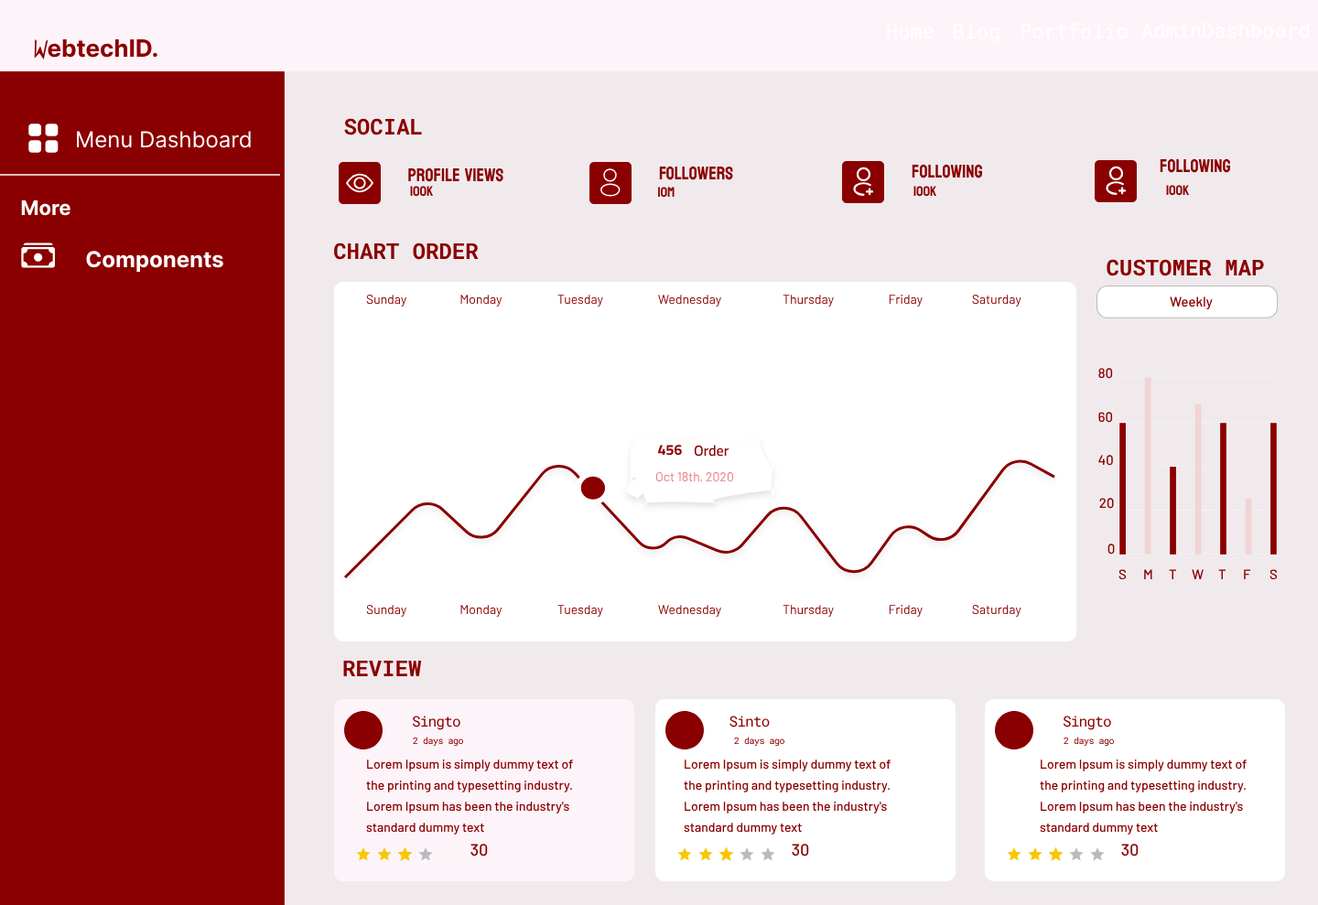
<style>
.page{position:relative;width:1318px;height:905px;background:#f0eaed}
.page>*{position:absolute;margin:0}
.t1{font:20.1px "RobotoMono-Regular";color:#ffffff}
.t2{font:23.8px "Inter-Bold";color:#8b0000}
.t3{font:22px "RobotoMono-Bold";color:#8b0000}
.t4{font:22px "Inter-Regular";color:#ffffff}
.t5{font:18.3px "Koulen-Regular";color:#8b0000}
.t6{font:13.7px "Koulen-Regular";color:#8b0000}
.t7{font:20.1px "Inter-Bold";color:#ffffff}
.t8{font:22px "Inter-Bold";color:#ffffff}
.t9{font:12.8px "Barlow-Regular";color:#8b0000}
.t10{font:13.7px "Barlow-Medium";color:#8b0000}
.t11{font:14.6px "Cairo-Bold";color:#8b0000}
.t12{font:14.6px "Cairo-SemiBold";color:#8b0000}
.t13{font:12.8px "Barlow-Regular";color:#e77676}
.t14{font:14.6px "RobotoMono-Regular";letter-spacing:-0.05em;color:#8b0000}
.t15{font:9.2px "RobotoMono-Regular";letter-spacing:-0.05em;color:#910e0f}
.t16{font:9.2px "RobotoMono-Regular";letter-spacing:-0.05em;color:#910f0f}
.t17{font:12.8px/21px "Barlow-Medium";color:#8b0000}
.t18{font:16.5px "Barlow-Medium";color:#8b0000}
</style>
<div class="page">
<p class="t1" style="left:887px;top:24px;width:46px;height:15px">Home</p>
<p class="t1" style="left:953px;top:23px;width:46px;height:20px">Blog</p>
<p class="t1" style="left:1021px;top:23px;width:106px;height:16px">Portfolio</p>
<p class="t1" style="left:1141px;top:22px;width:167px;height:16px">AdminDashboard</p>
<p class="t2" style="left:48px;top:39px;width:109px;height:19px">ebtechID.</p>
<p class="t3" style="left:344px;top:118px;width:78px;height:17px">SOCIAL</p>
<p class="t4" style="left:77px;top:131px;width:174px;height:17px">Menu Dashboard</p>
<p class="t5" style="left:1159px;top:158px;width:71px;height:15px">following</p>
<p class="t5" style="left:408px;top:167px;width:95px;height:15px">profile views</p>
<p class="t5" style="left:659px;top:166px;width:74px;height:14px">Followers</p>
<p class="t5" style="left:911px;top:164px;width:71px;height:14px">following</p>
<p class="t6" style="left:410px;top:186px;width:24px;height:11px">100k</p>
<p class="t6" style="left:913px;top:186px;width:24px;height:11px">100k</p>
<p class="t6" style="left:1166px;top:185px;width:24px;height:11px">100k</p>
<p class="t6" style="left:658px;top:187px;width:16px;height:11px">10m</p>
<p class="t7" style="left:21px;top:200px;width:49px;height:16px">More</p>
<p class="t3" style="left:334px;top:242px;width:145px;height:18px">CHART ORDER</p>
<p class="t8" style="left:86px;top:251px;width:137px;height:21px">Components</p>
<p class="t3" style="left:1106px;top:259px;width:158px;height:17px">CUSTOMER MAP</p>
<p class="t9" style="left:366px;top:295px;width:40px;height:12px">Sunday</p>
<p class="t9" style="left:460px;top:295px;width:42px;height:12px">Monday</p>
<p class="t9" style="left:557px;top:295px;width:46px;height:12px">Tuesday</p>
<p class="t9" style="left:658px;top:295px;width:63px;height:12px">Wednesday</p>
<p class="t9" style="left:782px;top:295px;width:52px;height:12px">Thursday</p>
<p class="t9" style="left:888px;top:295px;width:34px;height:12px">Friday</p>
<p class="t9" style="left:972px;top:295px;width:49px;height:12px">Saturday</p>
<p class="t10" style="left:1169px;top:296px;width:43px;height:13px">Weekly</p>
<p class="t10" style="left:1098px;top:368px;width:15px;height:11px">80</p>
<p class="t10" style="left:1098px;top:412px;width:15px;height:11px">60</p>
<p class="t11" style="left:658px;top:445px;width:24px;height:11px">456</p>
<p class="t12" style="left:694px;top:445px;width:35px;height:12px">Order</p>
<p class="t10" style="left:1098px;top:455px;width:15px;height:11px">40</p>
<p class="t13" style="left:656px;top:472px;width:77px;height:11px">Oct 18th, 2020</p>
<p class="t10" style="left:1099px;top:498px;width:15px;height:11px">20</p>
<p class="t10" style="left:1107px;top:544px;width:8px;height:11px">0</p>
<p class="t10" style="left:1118px;top:569px;width:8px;height:11px">S</p>
<p class="t10" style="left:1144px;top:569px;width:8px;height:10px">M</p>
<p class="t10" style="left:1168px;top:569px;width:9px;height:10px">T</p>
<p class="t10" style="left:1191px;top:569px;width:12px;height:10px">W</p>
<p class="t10" style="left:1218px;top:569px;width:8px;height:10px">T</p>
<p class="t10" style="left:1244px;top:569px;width:7px;height:10px">F</p>
<p class="t10" style="left:1269px;top:569px;width:8px;height:11px">S</p>
<p class="t9" style="left:366px;top:605px;width:40px;height:12px">Sunday</p>
<p class="t9" style="left:460px;top:605px;width:42px;height:12px">Monday</p>
<p class="t9" style="left:557px;top:605px;width:46px;height:12px">Tuesday</p>
<p class="t9" style="left:658px;top:605px;width:63px;height:12px">Wednesday</p>
<p class="t9" style="left:782px;top:605px;width:52px;height:12px">Thursday</p>
<p class="t9" style="left:888px;top:605px;width:34px;height:12px">Friday</p>
<p class="t9" style="left:972px;top:605px;width:49px;height:12px">Saturday</p>
<p class="t3" style="left:343px;top:660px;width:79px;height:16px">REVIEW</p>
<p class="t14" style="left:412px;top:716px;width:48px;height:14px">Singto</p>
<p class="t14" style="left:729px;top:716px;width:41px;height:11px">Sinto</p>
<p class="t14" style="left:1062px;top:716px;width:49px;height:14px">Singto</p>
<p class="t15" style="left:413px;top:737px;width:50px;height:10px">2 days ago</p>
<p class="t16" style="left:734px;top:737px;width:50px;height:10px">2 days ago</p>
<p class="t16" style="left:1063px;top:737px;width:51px;height:10px">2 days ago</p>
<p class="t17" style="left:366px;top:759px;width:207px;height:76px">Lorem Ipsum is simply dummy text of the printing and typesetting industry. Lorem Ipsum has been the industry's standard dummy text</p>
<p class="t17" style="left:684px;top:759px;width:206px;height:76px">Lorem Ipsum is simply dummy text of the printing and typesetting industry. Lorem Ipsum has been the industry's standard dummy text</p>
<p class="t17" style="left:1039px;top:759px;width:207px;height:76px">Lorem Ipsum is simply dummy text of the printing and typesetting industry. Lorem Ipsum has been the industry's standard dummy text</p>
<p class="t18" style="left:470px;top:844px;width:18px;height:12px">30</p>
<p class="t18" style="left:792px;top:844px;width:17px;height:12px">30</p>
<p class="t18" style="left:1121px;top:844px;width:17px;height:12px">30</p>
</div>
